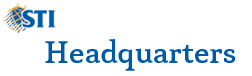
<style>
.page{position:relative;width:252px;height:76px;background:#ffffff}
.page>*{position:absolute;margin:0}
.t1{font:30.9px "Mido-Medium";color:#005aaa}
</style>
<div class="page">
<p class="t1" style="left:45px;top:39px;width:191px;height:32px">Headquarters</p>
</div>
